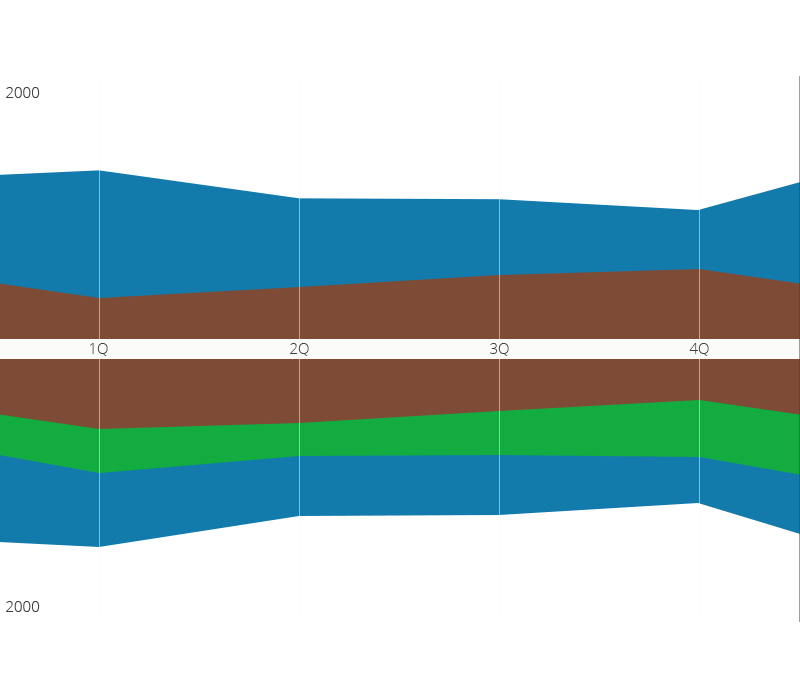
<style>
.page{position:relative;width:800px;height:700px;background:#ffffff}
.page>*{position:absolute;margin:0}
.t1{font:15px "OpenSans-Light";color:#404040}
</style>
<div class="page">
<p class="t1" style="left:6px;top:87px;width:34px;height:11px">2000</p>
<p class="t1" style="left:89px;top:343px;width:19px;height:13px">1Q</p>
<p class="t1" style="left:290px;top:343px;width:19px;height:13px">2Q</p>
<p class="t1" style="left:490px;top:343px;width:19px;height:13px">3Q</p>
<p class="t1" style="left:689px;top:343px;width:20px;height:13px">4Q</p>
<p class="t1" style="left:6px;top:601px;width:34px;height:11px">2000</p>
</div>
